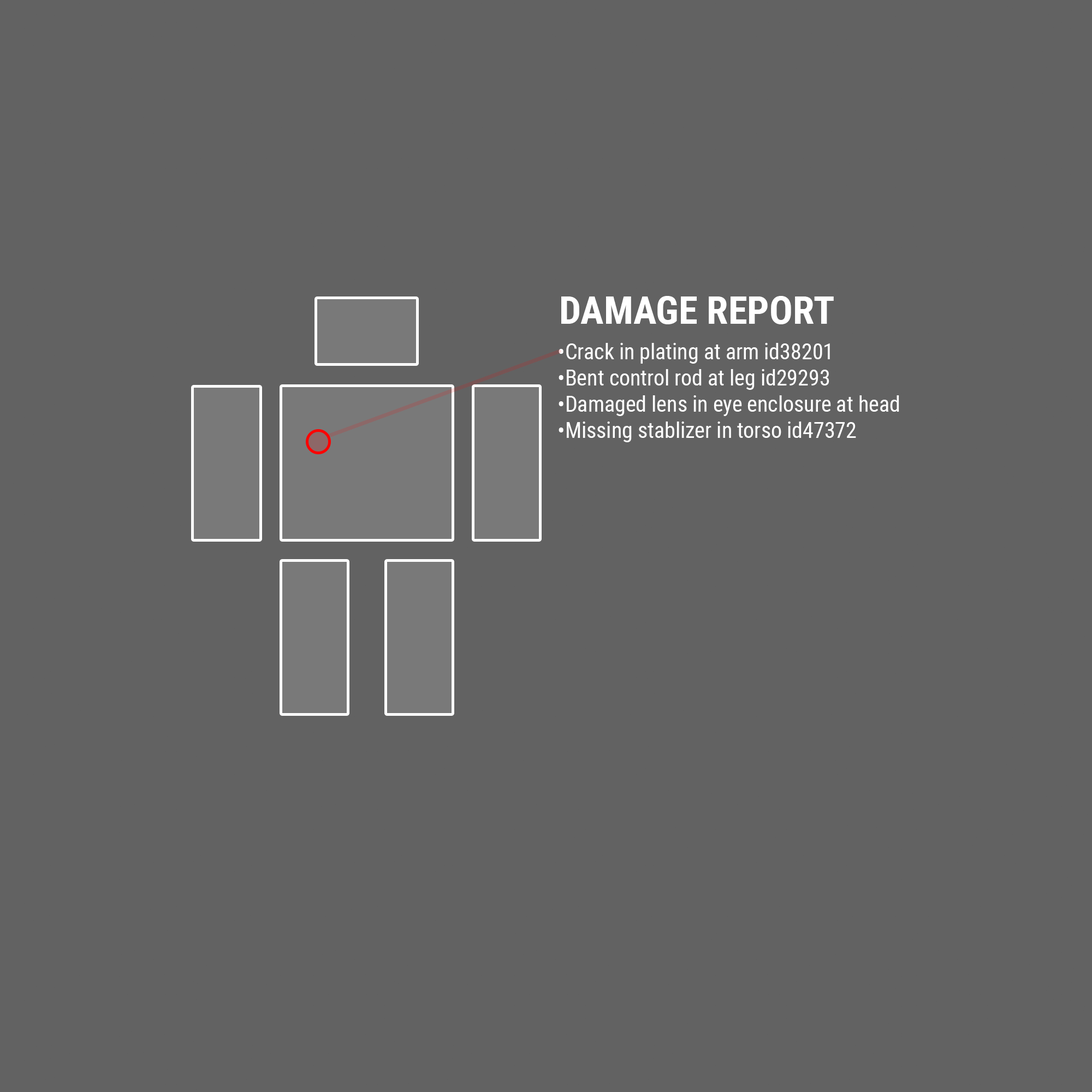
<style>
.page{position:relative;width:1092px;height:1092px;background:#626262}
.page>*{position:absolute;margin:0}
.t1{font:38.8px "RobotoCondensed-Bold";color:#ffffff}
.t2{font:21.8px "RobotoCondensed-Regular";color:#ffffff}
</style>
<div class="page">
<p class="t1" style="left:561px;top:296px;width:273px;height:28px">DAMAGE REPORT</p>
<p class="t2" style="left:559px;top:343px;width:340px;height:99px">•Crack in plating at arm id38201<br>•Bent control rod at leg id29293<br>•Damaged lens in eye enclosure at head<br>•Missing stablizer in torso id47372</p>
</div>
